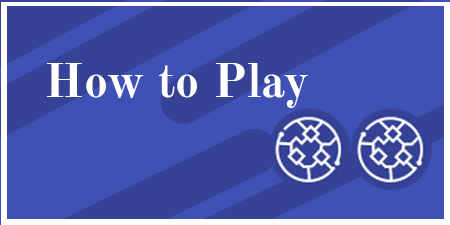
<style>
.page{position:relative;width:450px;height:225px;background:#3f51b5}
.page>*{position:absolute;margin:0}
.t1{font:48px "OldStandardTT-Bold";color:#ffffff}
</style>
<div class="page">
<p class="t1" style="left:47px;top:63px;width:261px;height:45px">How to Play</p>
</div>
